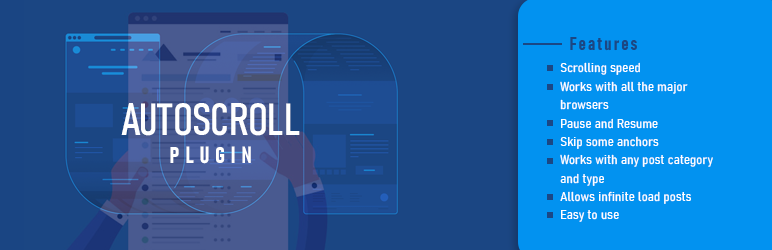
<style>
.page{position:relative;width:772px;height:250px;background:#0292f0}
.page>*{position:absolute;margin:0}
.t1{font:18.8px "Bahnschrift-BoldCondensed";letter-spacing:0.1em;color:#1b4784}
.t2{font:12.7px/18.4px "Bahnschrift-SemiLightSemiCondensed";letter-spacing:0.02em;color:#feffff}
.t3{font:44.6px/13.2px "Bahnschrift-Condensed";color:#ffffff;text-transform:uppercase}
.t4{font:23.3px/28.4px "Bahnschrift-BoldCondensed";letter-spacing:0.26em;color:#ffffff;text-transform:uppercase}
</style>
<div class="page">
<p class="t1" style="left:570px;top:37px;width:67px;height:14px">Features</p>
<p class="t2" style="left:560px;top:62px;width:153px;height:160px">Scrolling speed<br>Works with all the major<br>browsers<br>Pause and Resume<br>Skip some anchors<br>Works with any post category<br>and type<br>Allows infinite load posts<br>Easy to use</p>
<p class="t3" style="left:121px;top:103px;width:179px;height:61px;text-align:center">Autoscroll<br><span class="t4">plugin</span></p>
</div>
